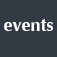
<style>
.page{position:relative;width:57px;height:57px;background:#323b44}
.page>*{position:absolute;margin:0}
.t1{font:18px "Optima-Bold";color:#ffffff}
</style>
<div class="page">
<p class="t1" style="left:4px;top:19px;width:49px;height:12px">events</p>
</div>
